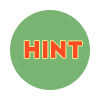
<style>
.page{position:relative;width:100px;height:100px;background:#ffffff}
.page>*{position:absolute;margin:0}
.t1{font:22.6px "BigJohn";color:#fb4c23}
</style>
<div class="page">
<p class="t1" style="left:24px;top:41px;width:58px;height:17px">HINT</p>
</div>
